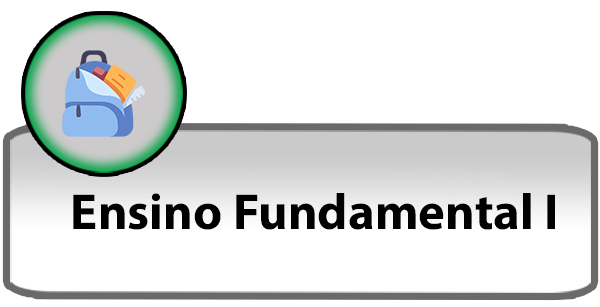
<style>
.page{position:relative;width:600px;height:307px;background:#ffffff}
.page>*{position:absolute;margin:0}
.t1{font:50.8px "MyriadConceptRoman-Bold";color:#000000}
</style>
<div class="page">
<p class="t1" style="left:73px;top:193px;width:482px;height:37px">Ensino Fundamental I</p>
</div>
